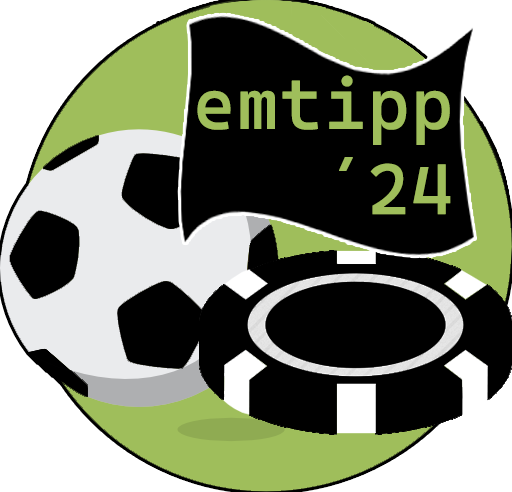
<style>
.page{position:relative;width:512px;height:492px;background:#000000}
.page>*{position:absolute;margin:0}
.t1{font:71px "CascadiaMono-Regular";color:#9fbe5b;font-weight:bold}
</style>
<div class="page">
<p class="t1" style="left:197px;top:75px;width:254px;height:140px">emtipp<br>   ´24</p>
</div>
